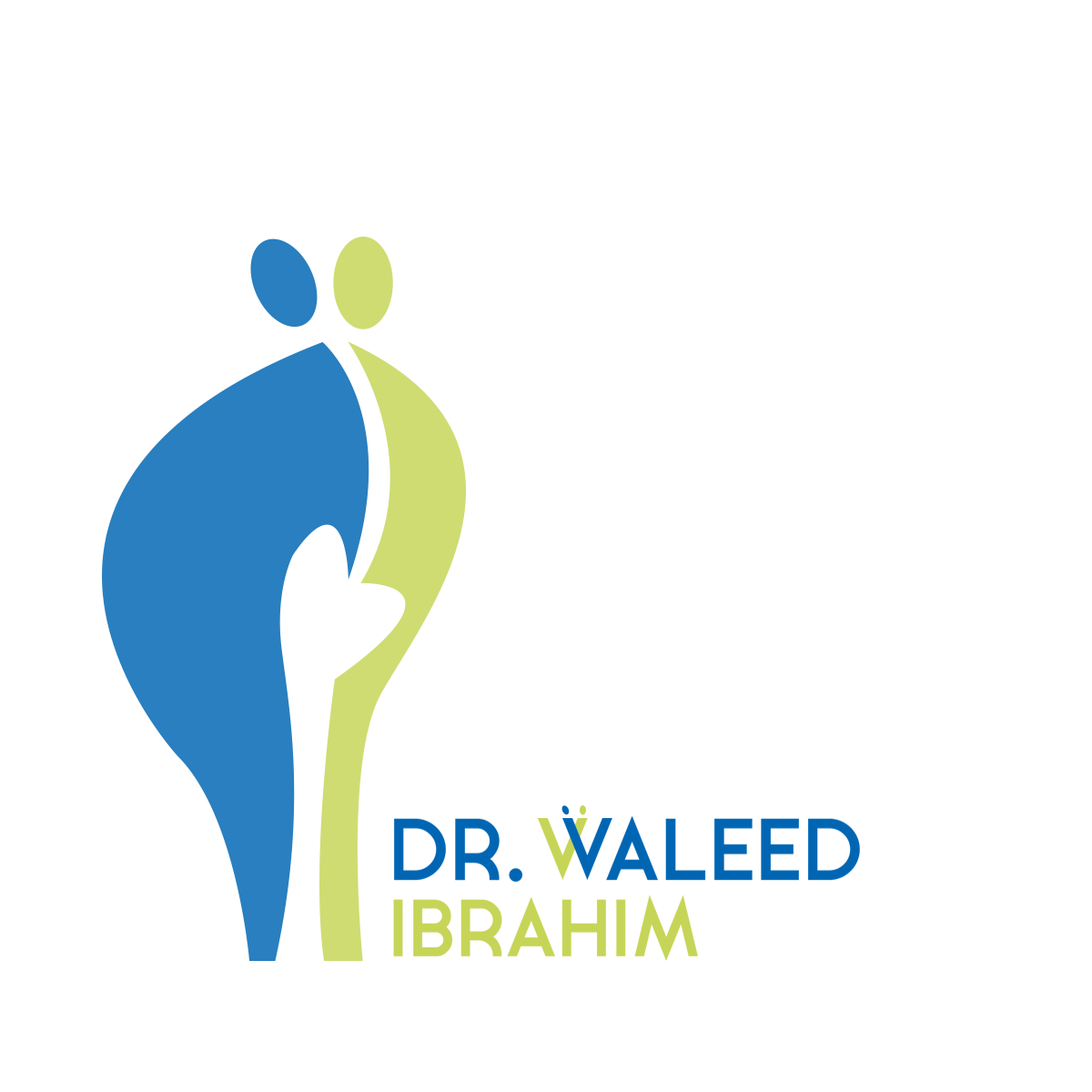
<style>
.page{position:relative;width:1092px;height:1092px;background:#ffffff}
.page>*{position:absolute;margin:0}
.t1{font:83.1px/76.4px "GinoraSans-Bold";color:#0066b3}
.t2{font:76.5px/76.4px "GinoraSans-Bold";color:#c6d557}
.t3{font:79px "GinoraSans-Bold";color:#c6d557}
.t4{font:79px "GinoraSans-Bold";color:#0066b3}
</style>
<div class="page">
<p class="t1" style="left:393px;top:816px;width:467px;height:145px">DR.     ALEED<br><span class="t2">IBRAHIM</span></p>
<p class="t3" style="left:537px;top:818px;width:51px;height:62px">V</p>
<p class="t4" style="left:562px;top:818px;width:50px;height:62px">V</p>
</div>
